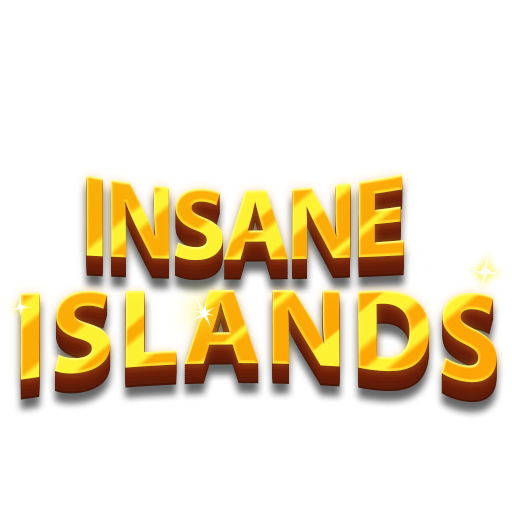
<style>
.page{position:relative;width:512px;height:512px;background:#ffffff}
.page>*{position:absolute;margin:0}
.t1{font:119.8px "MyriadPro-Bold";letter-spacing:-0.05em;scale:0.87 1}
.t2{font:137.6px "MyriadPro-Bold";letter-spacing:0.025em;scale:0.87 1}
</style>
<div class="page">
<p class="t1" style="left:86px;top:174px;width:318px;height:87px">INSANE</p>
<p class="t2" style="left:20px;top:290px;width:477px;height:93px">ISLANDS</p>
</div>
